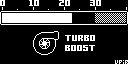
<style>
.page{position:relative;width:128px;height:64px;background:#000000}
.page>*{position:absolute;margin:0}
.t1{font:16px "Gamer";color:#ffffff}
.t2{font:16px/10px "Gamer";color:#ffffff}
</style>
<div class="page">
<p class="t1" style="left:0px;top:0px;width:5px;height:6px">0</p>
<p class="t1" style="left:29px;top:0px;width:10px;height:6px">10</p>
<p class="t1" style="left:59px;top:0px;width:11px;height:6px">20</p>
<p class="t1" style="left:90px;top:0px;width:11px;height:6px">30</p>
<p class="t2" style="left:65px;top:35px;width:30px;height:16px">TURBO<br>BOOST</p>
</div>
